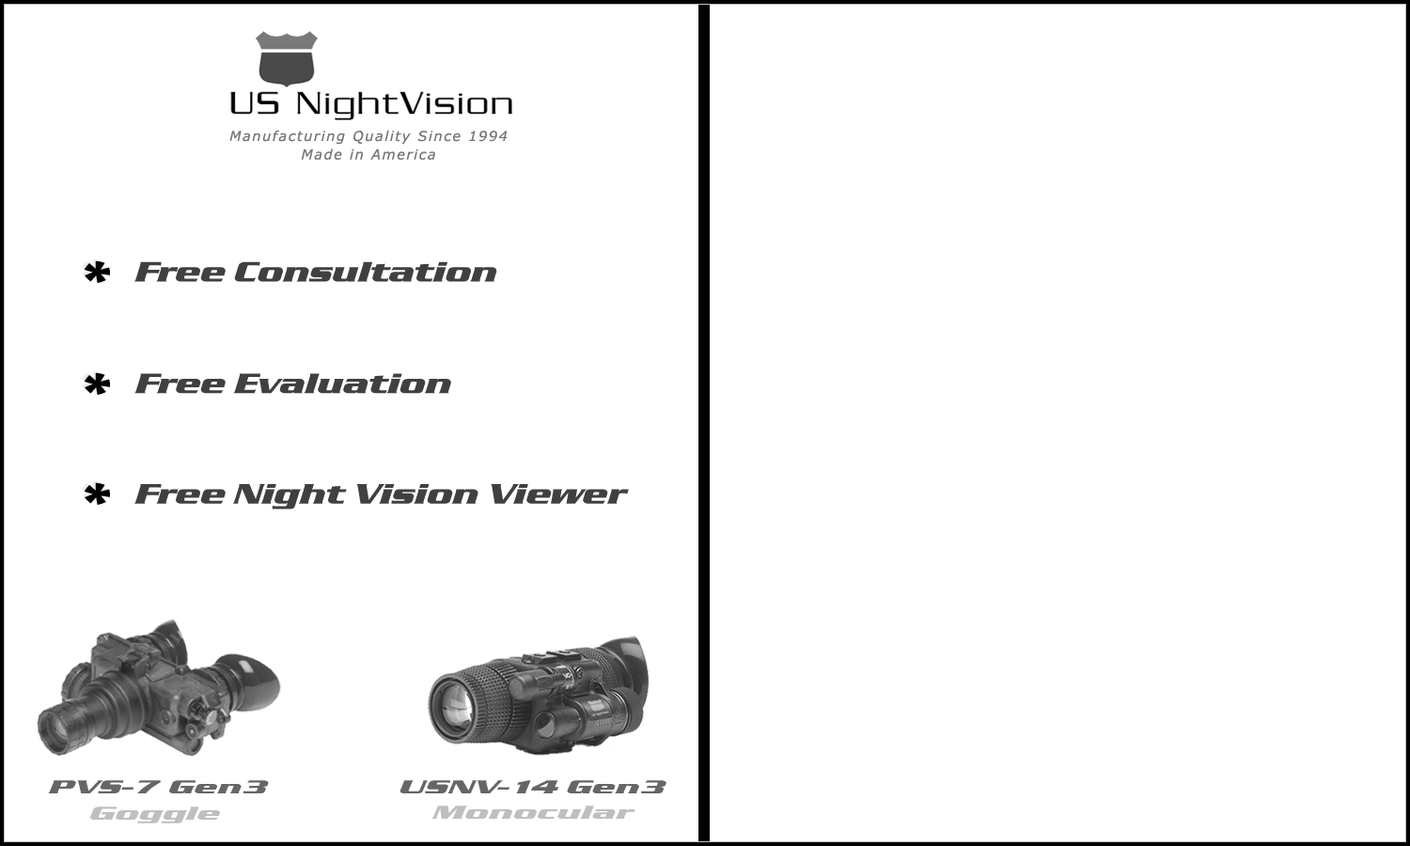
<style>
.page{position:relative;width:1410px;height:846px;background:#ffffff}
.page>*{position:absolute;margin:0}
.t1{font:13.7px "Verdana-Italic";letter-spacing:0.105em;color:#767676}
.t2{font:58.7px "SerpentineD-BoldItal";scale:1.2 1}
.t3{font:58.7px "SerpentineD-BoldItal";color:#000000;scale:1.2 1}
.t4{font:29.4px "SerpentineD-BoldItal";color:#404040;scale:1.2 1}
.t5{font:19.4px "SerpentineD-BoldItal";letter-spacing:0.02em;color:#666666;scale:1.67 1}
.t6{font:19.4px "SerpentineD-BoldItal";letter-spacing:0.02em;color:#bfbfbf;scale:1.67 1}
</style>
<div class="page">
<p class="t1" style="left:229px;top:130px;width:279px;height:30px;text-align:center">Manufacturing Quality Since 1994<br>Made in America</p>
<p class="t2" style="left:81px;top:258px;width:26px;height:23px">*</p>
<p class="t3" style="left:84px;top:260px;width:26px;height:23px">*</p>
<p class="t4" style="left:134px;top:261px;width:363px;height:21px">Free Consultation</p>
<p class="t2" style="left:81px;top:370px;width:26px;height:23px">*</p>
<p class="t3" style="left:84px;top:372px;width:26px;height:23px">*</p>
<p class="t4" style="left:134px;top:373px;width:317px;height:21px">Free Evaluation</p>
<p class="t2" style="left:81px;top:480px;width:26px;height:23px">*</p>
<p class="t3" style="left:84px;top:482px;width:26px;height:23px">*</p>
<p class="t4" style="left:134px;top:484px;width:495px;height:25px">Free Night Vision Viewer</p>
<p class="t5" style="left:48px;top:780px;width:221px;height:13px">PVS-7 Gen3</p>
<p class="t5" style="left:399px;top:780px;width:267px;height:13px">USNV-14 Gen3</p>
<p class="t6" style="left:90px;top:806px;width:130px;height:17px">Goggle</p>
<p class="t6" style="left:431px;top:805px;width:204px;height:14px">Monocular</p>
</div>
